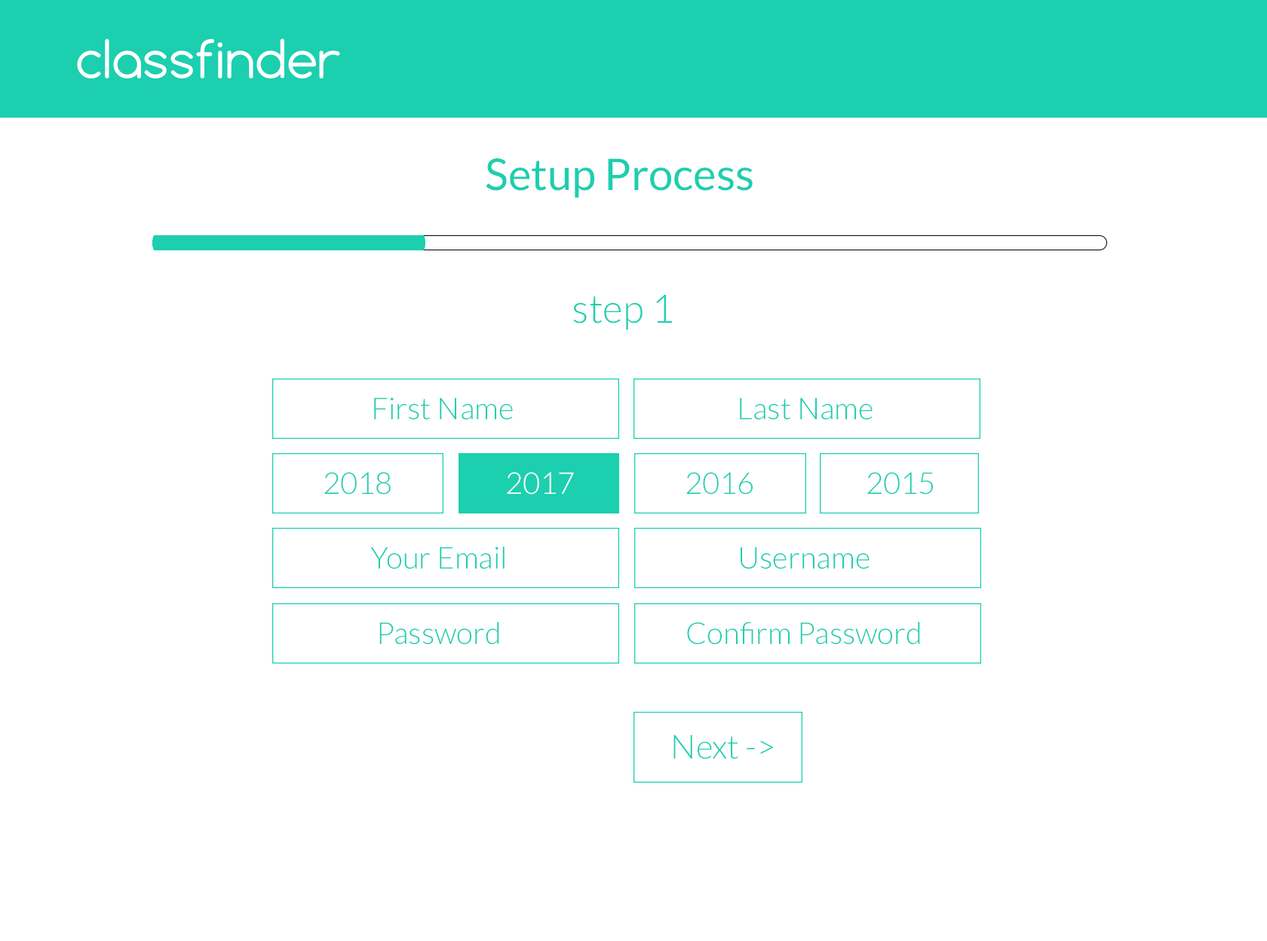
<style>
.page{position:relative;width:1267px;height:941px;background:#ffffff}
.page>*{position:absolute;margin:0}
.t1{font:43.7px "Lato-Regular";color:#1ccfaf}
.t2{font:39.2px "Lato-Light";color:#1ccfaf}
.t3{font:30.2px "Lato-Light";color:#1ccfaf}
.t4{font:30.2px "Lato-Light";color:#ffffff}
.t5{font:33.2px "Lato-Light";color:#1ccfaf}
</style>
<div class="page">
<p class="t1" style="left:486px;top:158px;width:267px;height:40px">Setup Process</p>
<p class="t2" style="left:573px;top:295px;width:99px;height:35px">step 1</p>
<p class="t3" style="left:374px;top:397px;width:139px;height:23px">First Name</p>
<p class="t3" style="left:740px;top:397px;width:133px;height:23px">Last Name</p>
<p class="t3" style="left:324px;top:472px;width:67px;height:23px">2018</p>
<p class="t4" style="left:507px;top:472px;width:67px;height:23px">2017</p>
<p class="t3" style="left:686px;top:472px;width:67px;height:23px">2016</p>
<p class="t3" style="left:867px;top:472px;width:66px;height:23px">2015</p>
<p class="t3" style="left:370px;top:547px;width:135px;height:22px">Your Email</p>
<p class="t3" style="left:741px;top:547px;width:129px;height:22px">Username</p>
<p class="t3" style="left:379px;top:622px;width:120px;height:23px">Password</p>
<p class="t3" style="left:687px;top:622px;width:233px;height:23px">Confirm Password</p>
<p class="t5" style="left:673px;top:735px;width:100px;height:24px">Next -&gt;</p>
</div>
